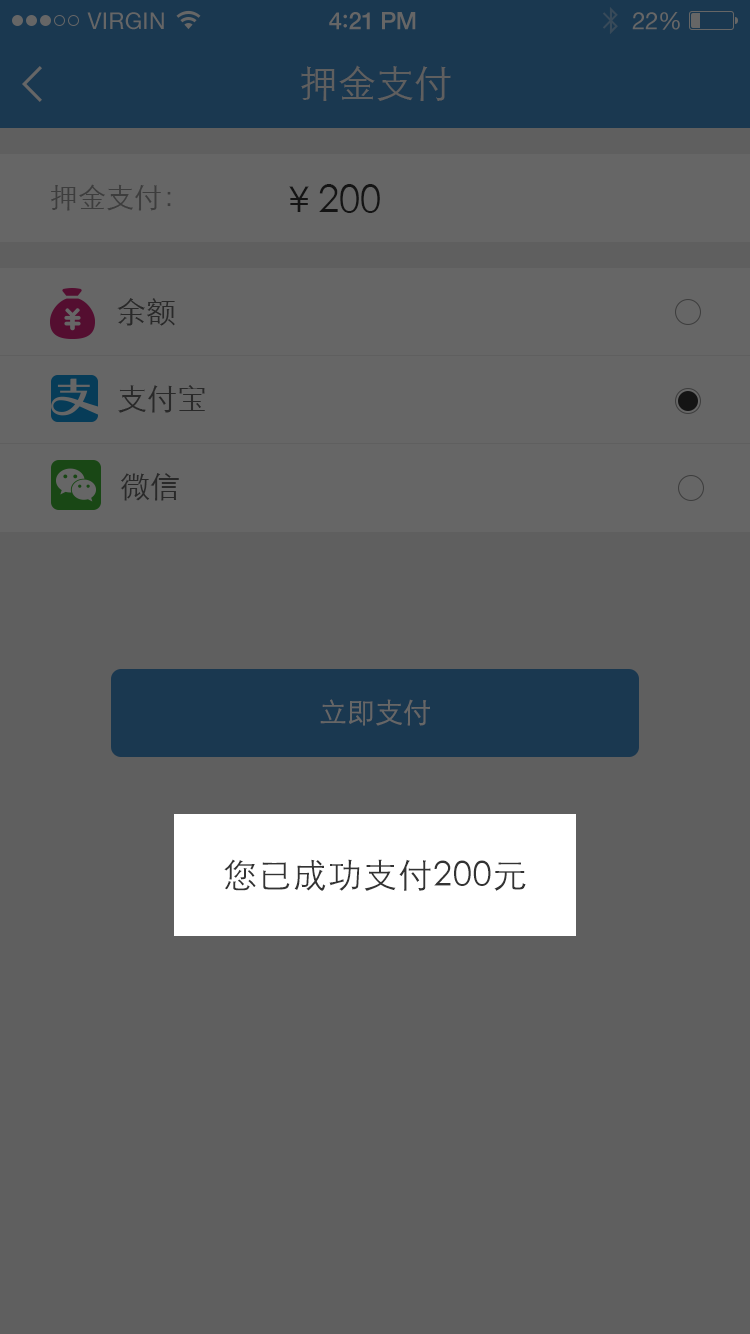
<style>
.page{position:relative;width:750px;height:1334px;background:#5f5f5f}
.page>*{position:absolute;margin:0}
.t1{font:23px "HelveticaNeue";letter-spacing:0.02em;color:#666666}
.t2{font:24px "HelveticaNeue-Medium";letter-spacing:-0.02em;color:#666666}
.t3{font:26px "Avenir-Medium";letter-spacing:-0.02em;color:#666666}
.t4{font:24px "HelveticaNeue";letter-spacing:-0.02em;color:#666666}
.t5{font:38px "STXihei";color:#5f5f5f}
.t6{font:28px "STXihei";color:#3d3d3d}
.t7{font:38px "STXihei";color:#141414}
.t8{font:30px "STXihei";color:#292929}
.t9{font:28px "STXihei";color:#666666}
.t10{font:34px "STXihei";letter-spacing:0.03em;color:#333333}
</style>
<div class="page">
<p class="t1" style="left:87px;top:12px;width:77px;height:18px">VIRGIN</p>
<p class="t2" style="left:329px;top:12px;width:87px;height:18px">4<span class="t3">:</span>21 PM</p>
<p class="t4" style="left:632px;top:12px;width:48px;height:18px">22%</p>
<p class="t5" style="left:301px;top:65px;width:150px;height:36px">押金支付</p>
<p class="t6" style="left:51px;top:184px;width:120px;height:27px">押金支付：</p>
<p class="t7" style="left:289px;top:184px;width:91px;height:29px">￥200</p>
<p class="t8" style="left:117px;top:298px;width:58px;height:28px">余额</p>
<p class="t8" style="left:118px;top:385px;width:87px;height:28px">支付宝</p>
<p class="t8" style="left:120px;top:473px;width:59px;height:28px">微信</p>
<p class="t9" style="left:320px;top:699px;width:110px;height:27px">立即支付</p>
<p class="t10" style="left:224px;top:859px;width:302px;height:32px">您已成功支付200元</p>
</div>
